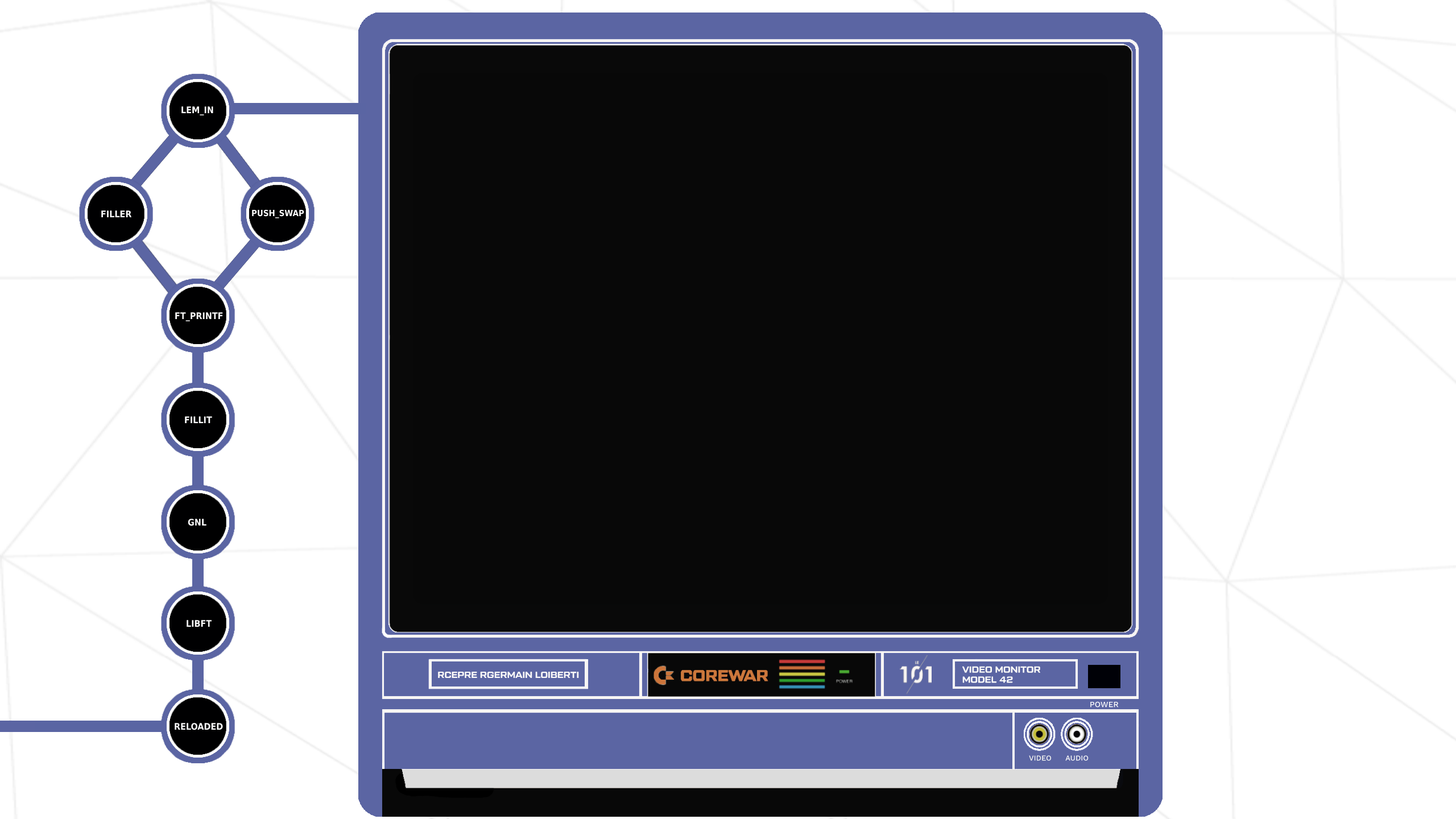
<style>
.page{position:relative;width:1456px;height:819px;background:#ffffff}
.page>*{position:absolute;margin:0}
.t1{font:9.1px "DejaVuSansCondensed-Bold";color:#fbfbfb}
.t2{font:8.5px "DejaVuSansCondensed-Bold";color:#fbfbfb}
.t3{font:9px "TacticRound-Bld";color:#fbfbf7}
.t4{font:9px "TacticRound-Bld";color:#fbf9f8}
.t5{font:9px "TacticRound-Bld";color:#fcfcfa}
.t6{font:7.9px "WorkSans-Medium";color:#fefefe}
.t7{font:7.4px "WorkSans-Medium";color:#fafaf5}
.t8{font:7.4px "WorkSans-Medium";color:#fdfdfb}
</style>
<div class="page">
<p class="t1" style="left:181px;top:106px;width:32px;height:9px">LEM_IN</p>
<p class="t2" style="left:252px;top:209px;width:52px;height:9px">PUSH_SWAP</p>
<p class="t1" style="left:101px;top:210px;width:31px;height:7px">FILLER</p>
<p class="t1" style="left:175px;top:312px;width:48px;height:9px">FT_PRINTF</p>
<p class="t1" style="left:185px;top:416px;width:27px;height:7px">FILLIT</p>
<p class="t1" style="left:188px;top:519px;width:18px;height:7px">GNL</p>
<p class="t1" style="left:187px;top:620px;width:25px;height:7px">LIBFT</p>
<p class="t3" style="left:962px;top:666px;width:78px;height:7px">VIDEO MONITOR</p>
<p class="t4" style="left:438px;top:672px;width:141px;height:6px">RCEPRE RGERMAIN LOIBERTI</p>
<p class="t5" style="left:962px;top:676px;width:51px;height:7px">MODEL 42</p>
<p class="t6" style="left:1090px;top:701px;width:29px;height:7px">POWER</p>
<p class="t1" style="left:175px;top:723px;width:48px;height:7px">RELOADED</p>
<p class="t7" style="left:1029px;top:755px;width:22px;height:6px">VIDEO</p>
<p class="t8" style="left:1065px;top:755px;width:24px;height:6px">AUDIO</p>
</div>
